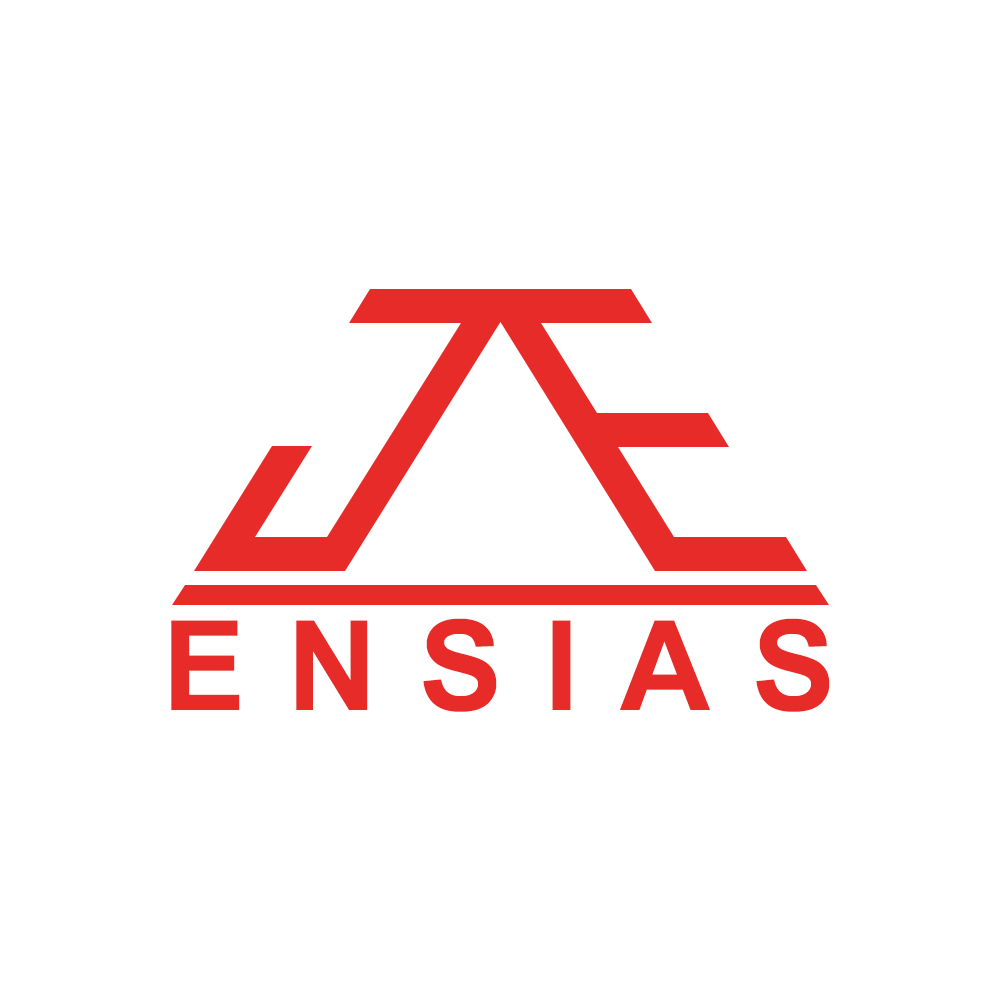
<style>
.page{position:relative;width:1000px;height:1000px;background:#ffffff}
.page>*{position:absolute;margin:0}
.t1{font:125px "Arial-BoldMT";letter-spacing:0.33em;color:#e62b29}
</style>
<div class="page">
<p class="t1" style="left:171px;top:618px;width:659px;height:94px">ENSIAS</p>
</div>
